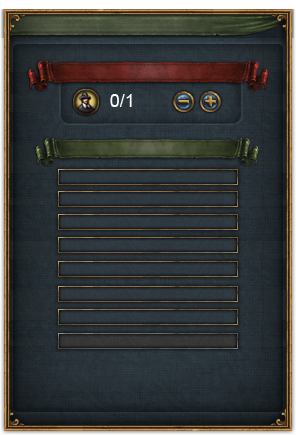
<style>
.page{position:relative;width:296px;height:435px}
.page>*{position:absolute;margin:0}
.t1{font:18px "ArialMT";color:#ffffff}
</style>
<div class="page">
<p class="t1" style="left:110px;top:94px;width:22px;height:13px">0/1</p>
</div>
